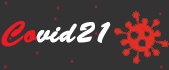
<style>
.page{position:relative;width:169px;height:70px;background:#333333}
.page>*{position:absolute;margin:0}
.t1{font:30px "BrushScriptStd";color:#ffffff;font-weight:bold}
.t2{font:30px "BrushScriptStd";color:#ed1c24;font-weight:bold}
</style>
<div class="page">
<p class="t1" style="left:1px;top:21px;width:110px;height:26px"><span class="t2">Co</span>vid21</p>
</div>
